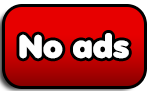
<style>
.page{position:relative;width:150px;height:91px;background:#e70000}
.page>*{position:absolute;margin:0}
.t1{font:32px "Debussy";color:#ffffff}
</style>
<div class="page">
<p class="t1" style="left:19px;top:33px;width:110px;height:26px">No ads</p>
</div>
